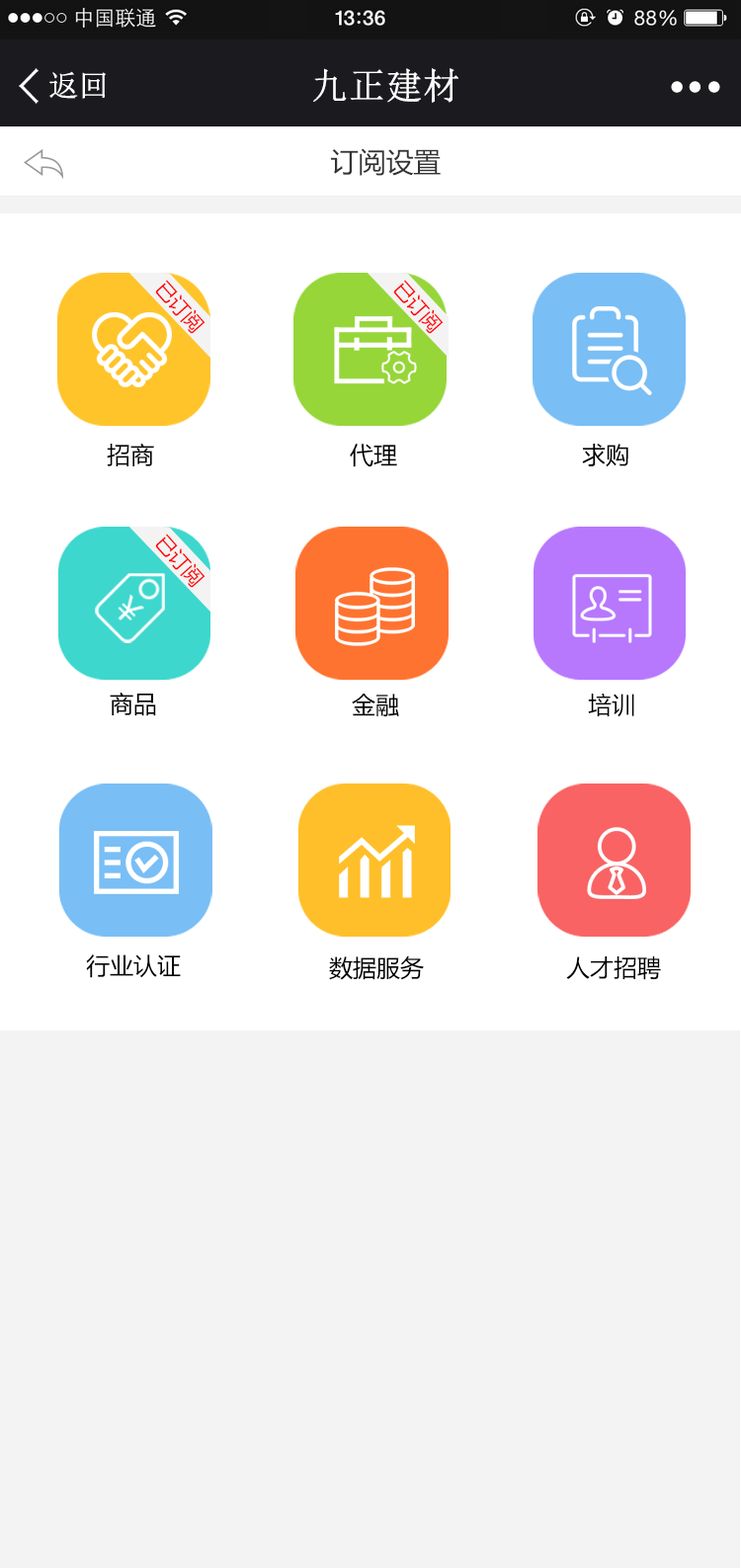
<style>
.page{position:relative;width:741px;height:1568px;background:#ffffff}
.page>*{position:absolute;margin:0}
.t1{font:29.6px "NSimSun";color:#ffffff;font-weight:bold}
.t2{font:36.2px "NSimSun";color:#ffffff;font-weight:bold}
.t3{font:27.7px "MicrosoftYaHei";color:#333333}
.t4{font:27.7px "MicrosoftYaHei";color:#333333;font-weight:bold}
.t5{font:19.8px "MicrosoftYaHei";color:#ff0000}
.t6{font:23.7px "MicrosoftYaHei";color:#000000}
</style>
<div class="page">
<p class="t1" style="left:49px;top:71px;width:57px;height:28px">返回</p>
<p class="t2" style="left:313px;top:68px;width:145px;height:35px">九正建材</p>
<p class="t3" style="left:331px;top:148px;width:110px;height:28px"><span class="t4"><br></span>订阅设置</p>
<p class="t5" style="left:155px;top:280px;width:51px;height:54px;rotate:48deg">已订阅</p>
<p class="t5" style="left:393px;top:280px;width:51px;height:54px;rotate:48deg">已订阅</p>
<p class="t6" style="left:107px;top:443px;width:47px;height:23px">招商</p>
<p class="t6" style="left:350px;top:444px;width:47px;height:23px">代理</p>
<p class="t6" style="left:582px;top:444px;width:46px;height:23px">求购</p>
<p class="t5" style="left:155px;top:534px;width:51px;height:54px;rotate:48deg">已订阅</p>
<p class="t6" style="left:110px;top:692px;width:46px;height:24px">商品</p>
<p class="t6" style="left:352px;top:694px;width:47px;height:22px">金融</p>
<p class="t6" style="left:588px;top:693px;width:46px;height:24px">培训</p>
<p class="t6" style="left:86px;top:954px;width:95px;height:24px">行业认证</p>
<p class="t6" style="left:329px;top:955px;width:95px;height:25px">数据服务</p>
<p class="t6" style="left:566px;top:956px;width:95px;height:24px">人才招聘</p>
</div>
